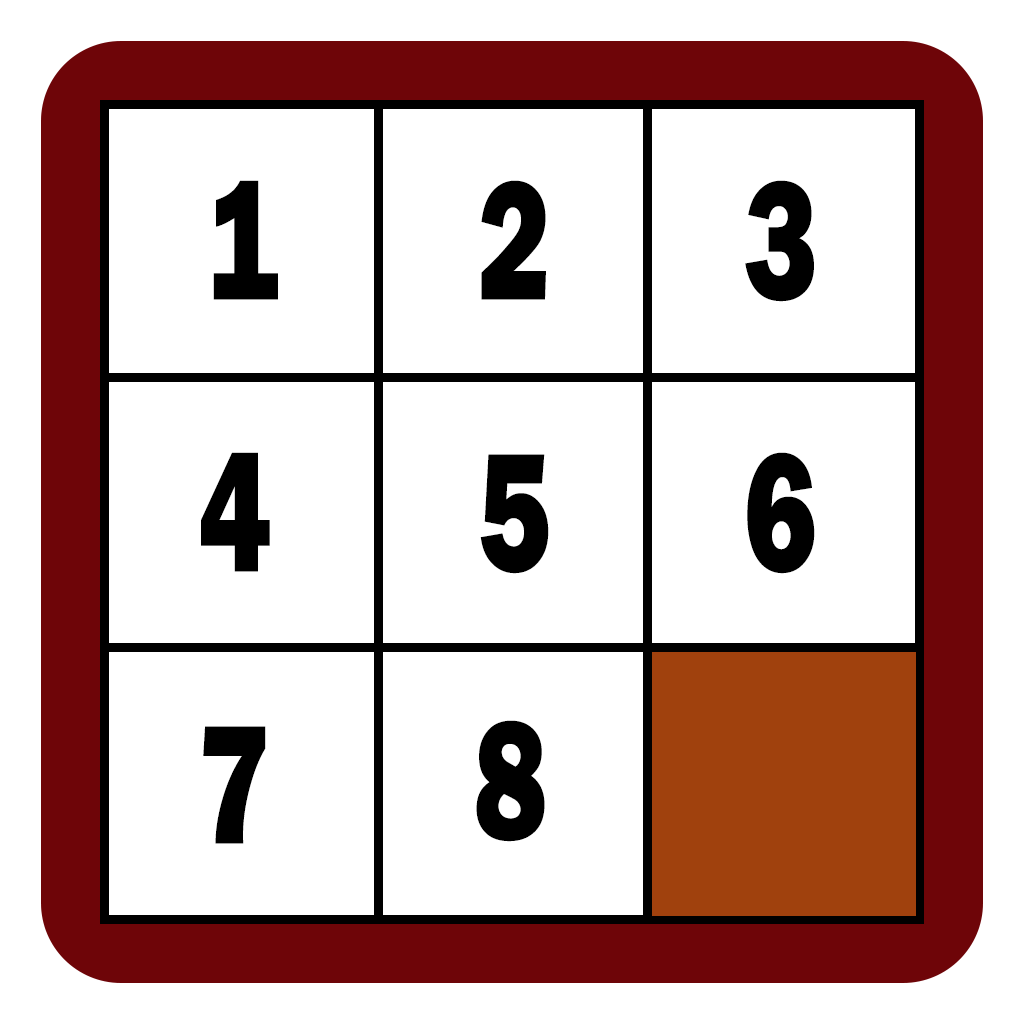
<style>
.page{position:relative;width:1024px;height:1024px;background:#ffffff}
.page>*{position:absolute;margin:0}
.t1{font:175px "FranklinGothic-Heavy";color:#000000;scale:0.71 1}
</style>
<div class="page">
<p class="t1" style="left:213px;top:180px;width:65px;height:120px">1</p>
<p class="t1" style="left:481px;top:180px;width:65px;height:120px">2</p>
<p class="t1" style="left:745px;top:180px;width:69px;height:122px">3</p>
<p class="t1" style="left:201px;top:452px;width:69px;height:120px">4</p>
<p class="t1" style="left:480px;top:454px;width:69px;height:120px">5</p>
<p class="t1" style="left:747px;top:452px;width:68px;height:122px">6</p>
<p class="t1" style="left:203px;top:726px;width:63px;height:118px">7</p>
<p class="t1" style="left:476px;top:720px;width:69px;height:122px">8</p>
</div>
